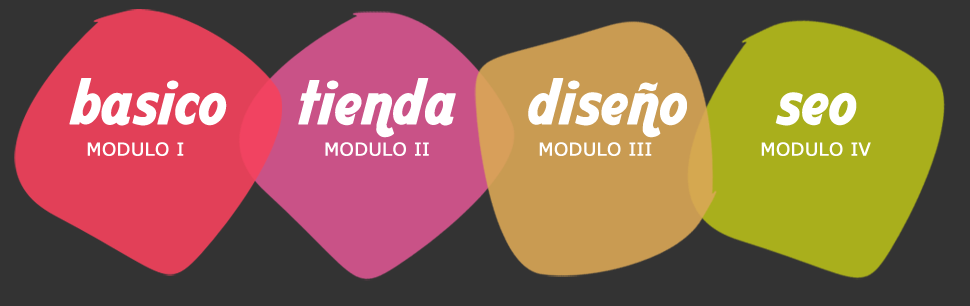
<style>
.page{position:relative;width:970px;height:306px;background:#333333}
.page>*{position:absolute;margin:0}
.t1{font:64px "AardvarkCafe";color:#ffffff;font-weight:bold}
.t2{font:18px "Verdana";color:#ffffff;font-weight:bold}
</style>
<div class="page">
<p class="t1" style="left:69px;top:78px;width:158px;height:48px">basico</p>
<p class="t1" style="left:298px;top:78px;width:158px;height:60px">tienda</p>
<p class="t1" style="left:528px;top:78px;width:159px;height:60px">diseño</p>
<p class="t1" style="left:775px;top:92px;width:82px;height:34px">seo</p>
<p class="t2" style="left:87px;top:142px;width:97px;height:14px">MODULO I</p>
<p class="t2" style="left:325px;top:142px;width:104px;height:14px">MODULO II</p>
<p class="t2" style="left:539px;top:142px;width:113px;height:14px">MODULO III</p>
<p class="t2" style="left:761px;top:142px;width:110px;height:14px">MODULO IV</p>
</div>
